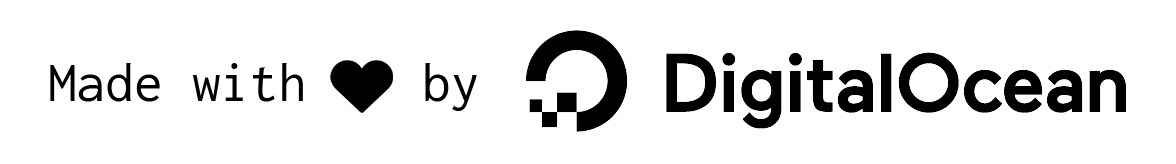
<style>
.page{position:relative;width:1176px;height:164px;background:#ffffff}
.page>*{position:absolute;margin:0}
.t1{font:57px "Inconsolata-Regular";color:#000000}
</style>
<div class="page">
<p class="t1" style="left:50px;top:63px;width:427px;height:48px">Made with    by</p>
</div>
